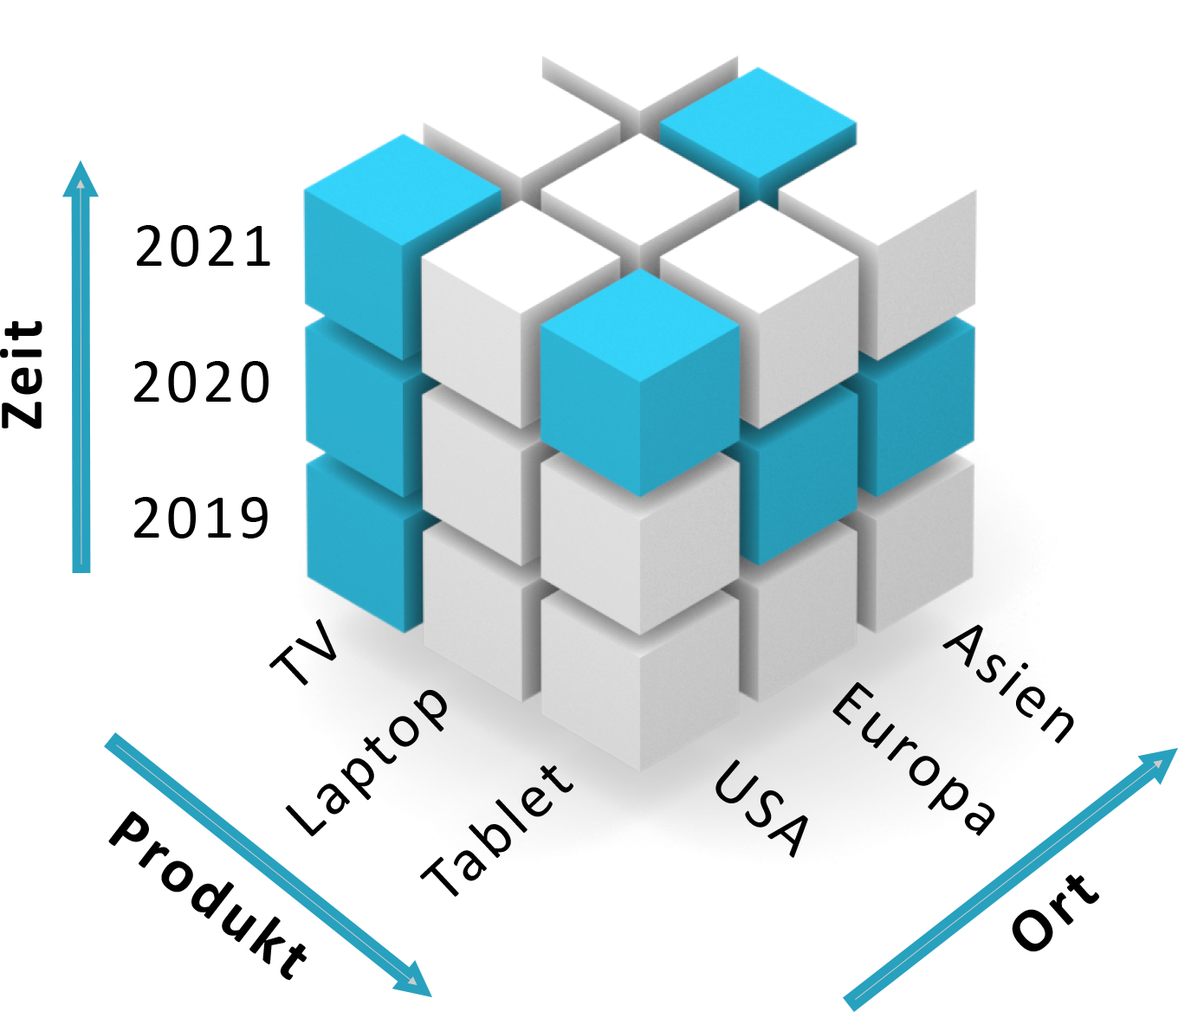
<style>
.page{position:relative;width:1178px;height:1012px;background:#ffffff}
.page>*{position:absolute;margin:0}
.t1{font:62.4px "Calibri";letter-spacing:0.075em;color:#000000}
.t2{font:62.4px "Calibri-Bold";letter-spacing:0.075em;color:#000000}
</style>
<div class="page">
<p class="t1" style="left:137px;top:225px;width:133px;height:42px">2021</p>
<p class="t2" style="left:0px;top:321px;width:42px;height:109px;rotate:-90deg">Zeit</p>
<p class="t1" style="left:134px;top:361px;width:134px;height:42px">2020</p>
<p class="t1" style="left:134px;top:497px;width:134px;height:42px">2019</p>
<p class="t1" style="left:269px;top:619px;width:68px;height:67px;rotate:-43deg">TV</p>
<p class="t1" style="left:942px;top:624px;width:132px;height:120px;rotate:40deg">Asien</p>
<p class="t1" style="left:832px;top:682px;width:163px;height:155px;rotate:40deg">Europa</p>
<p class="t1" style="left:285px;top:690px;width:162px;height:147px;rotate:-43deg">Laptop</p>
<p class="t1" style="left:715px;top:760px;width:93px;height:98px;rotate:40deg">USA</p>
<p class="t1" style="left:420px;top:766px;width:153px;height:131px;rotate:-43deg">Tablet</p>
<p class="t2" style="left:108px;top:811px;width:199px;height:169px;rotate:38deg">Produkt</p>
<p class="t2" style="left:1012px;top:875px;width:88px;height:77px;rotate:-42deg">Ort</p>
</div>
